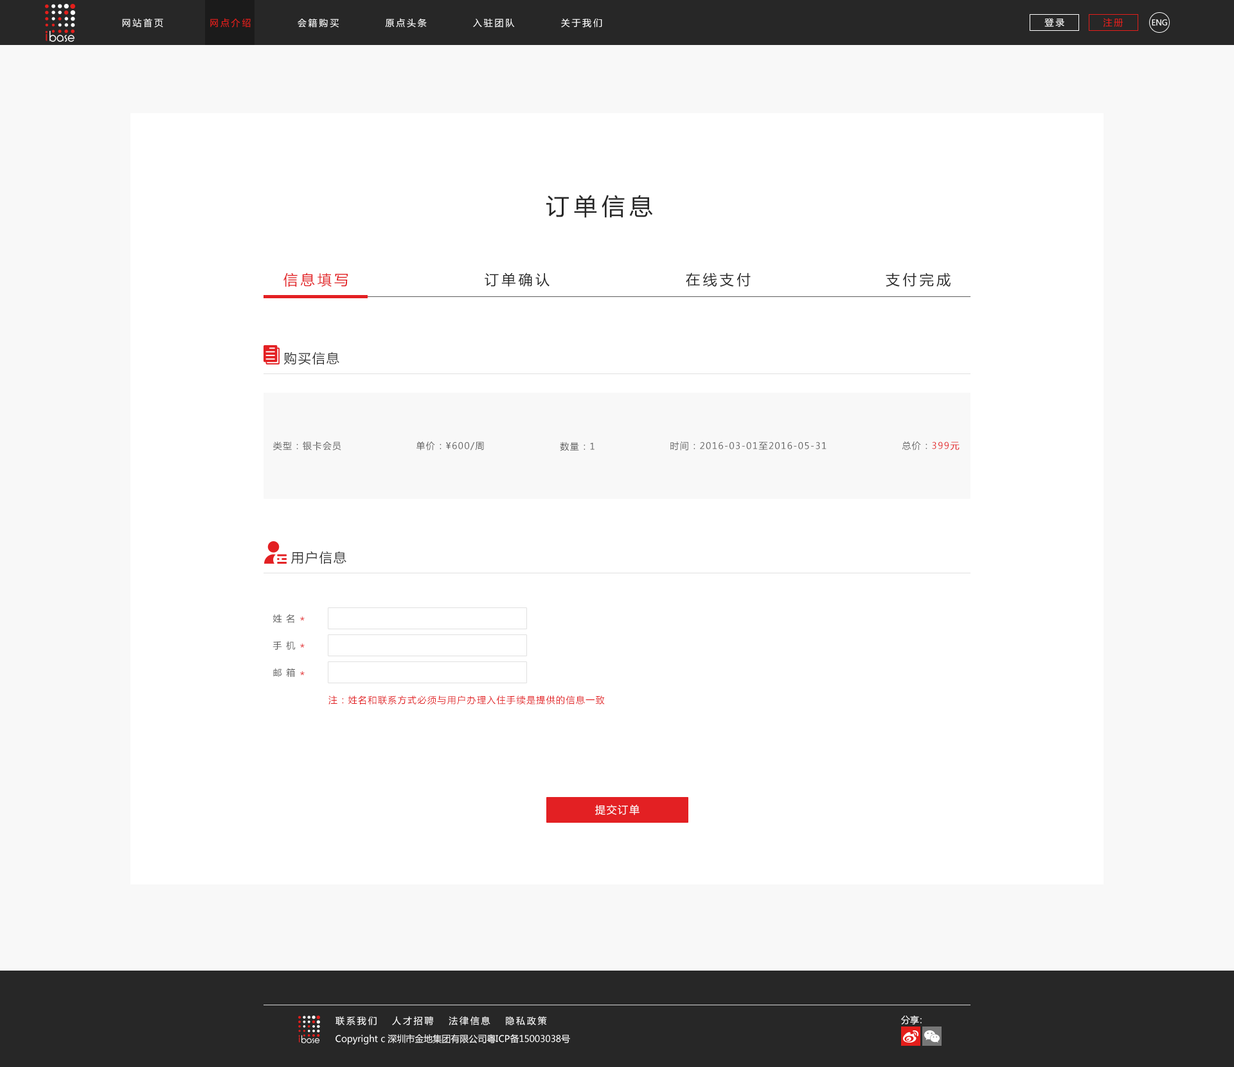
<style>
.page{position:relative;width:1234px;height:1067px;background:#ffffff}
.page>*{position:absolute;margin:0}
.t1{font:9px "MicrosoftYaHei";letter-spacing:0.2em;color:#ffffff}
.t2{font:9px "MicrosoftYaHei";letter-spacing:0.2em;color:#e41e1b}
.t3{font:7.7px "MicrosoftYaHei";letter-spacing:-0.01em;color:#ffffff}
.t4{font:23.1px "MicrosoftYaHei";letter-spacing:0.2em;color:#272727;text-transform:uppercase}
.t5{font:14.1px "MicrosoftYaHei";letter-spacing:0.2em;color:#e32023;text-transform:uppercase}
.t6{font:14.1px "MicrosoftYaHei";letter-spacing:0.2em;color:#272727;text-transform:uppercase}
.t7{font:9px "MicrosoftYaHei";letter-spacing:0.1em;color:#ffffff;text-transform:uppercase}
.t8{font:12.9px "MicrosoftYaHei";letter-spacing:0.1em;color:#373737;text-transform:uppercase}
.t9{font:10.3px "MicrosoftYaHei";letter-spacing:0.1em;color:#ffffff;text-transform:uppercase}
.t10{font:9px "MicrosoftYaHei";letter-spacing:0.1em;color:#5e5e5e;text-transform:uppercase}
.t11{font:9px "MicrosoftYaHei";letter-spacing:0.1em;color:#e32023;text-transform:uppercase}
.t12{font:10.3px "MicrosoftYaHei";letter-spacing:0.1em;color:#e32023;text-transform:uppercase}
.t13{font:9px "MicrosoftYaHei";letter-spacing:-0.3em;color:#ffffff}
.t14{font:9px "MicrosoftYaHei";color:#ffffff}
</style>
<div class="page">
<p class="t1" style="left:122px;top:18px;width:480px;height:10px">网站首页          <span class="t2">网点介绍</span>          会籍购买          原点头条          入驻团队          关于我们</p>
<p class="t1" style="left:1045px;top:18px;width:20px;height:9px">登录</p>
<p class="t2" style="left:1103px;top:18px;width:20px;height:9px">注册</p>
<p class="t3" style="left:1152px;top:19px;width:15px;height:7px">ENG</p>
<p class="t4" style="left:546px;top:195px;width:107px;height:23px">订单信息</p>
<p class="t5" style="left:284px;top:273px;width:64px;height:14px">信息填写</p>
<p class="t6" style="left:485px;top:273px;width:65px;height:14px">订单确认</p>
<p class="t6" style="left:686px;top:273px;width:65px;height:14px">在线支付</p>
<p class="t6" style="left:886px;top:273px;width:65px;height:14px">支付完成</p>
<p class="t7" style="left:284px;top:352px;width:405px;height:13px"><span class="t8">购买信息              </span><span class="t9">起始时间：</span>2016-01-20                      <span class="t9">入驻周期：</span>深圳园博园</p>
<p class="t10" style="left:273px;top:441px;width:68px;height:10px">类型：银卡会员</p>
<p class="t10" style="left:417px;top:441px;width:67px;height:10px">单价：¥600/周</p>
<p class="t10" style="left:560px;top:442px;width:35px;height:9px">数量：1</p>
<p class="t10" style="left:670px;top:441px;width:157px;height:10px">时间：2016-03-01至2016-05-31</p>
<p class="t11" style="left:902px;top:441px;width:58px;height:10px"><span class="t10">   总价：</span>399元</p>
<p class="t8" style="left:291px;top:551px;width:55px;height:13px">用户信息</p>
<p class="t10" style="left:273px;top:614px;width:21px;height:10px">姓 名</p>
<p class="t12" style="left:300px;top:616px;width:5px;height:5px">*</p>
<p class="t10" style="left:273px;top:641px;width:23px;height:10px">手 机</p>
<p class="t12" style="left:300px;top:644px;width:5px;height:4px">*</p>
<p class="t10" style="left:273px;top:668px;width:22px;height:9px">邮 箱</p>
<p class="t12" style="left:300px;top:671px;width:5px;height:5px">*</p>
<p class="t11" style="left:328px;top:696px;width:277px;height:9px">注：姓名和联系方式必须与用户办理入住手续是提供的信息一致</p>
<p class="t9" style="left:595px;top:805px;width:45px;height:10px">提交订单</p>
<p class="t1" style="left:336px;top:1016px;width:211px;height:9px">联系我们   人才招聘   法律信息   隐私政策</p>
<p class="t13" style="left:901px;top:1016px;width:21px;height:9px"><span class="t14">分</span>享：</p>
<p class="t14" style="left:336px;top:1034px;width:234px;height:11px">Copyright c 深圳市金地集团有限公司粤ICP备15003038号</p>
</div>
